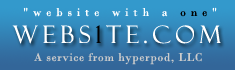
<style>
.page{position:relative;width:235px;height:70px}
.page>*{position:absolute;margin:0}
.t1{font:12px "BodoniMT";letter-spacing:0.4em;color:#ffffff}
.t2{font:12px "BodoniMT";letter-spacing:0.4em;color:#000000}
.t3{font:24px "FelixTitlingMT";letter-spacing:0.2em;color:#ffffff}
.t4{font:24px "FelixTitlingMT";letter-spacing:0.2em;color:#000000}
.t5{font:12px "BodoniMT";letter-spacing:0.05em;color:#cccccc}
</style>
<div class="page">
<p class="t1" style="left:23px;top:7px;width:194px;height:10px">"website with a <span class="t2">one</span>"</p>
<p class="t3" style="left:12px;top:25px;width:209px;height:19px">WEBS<span class="t4">1</span>TE.com</p>
<p class="t5" style="left:34px;top:52px;width:168px;height:13px">A service from hyperpod, LLC</p>
</div>
